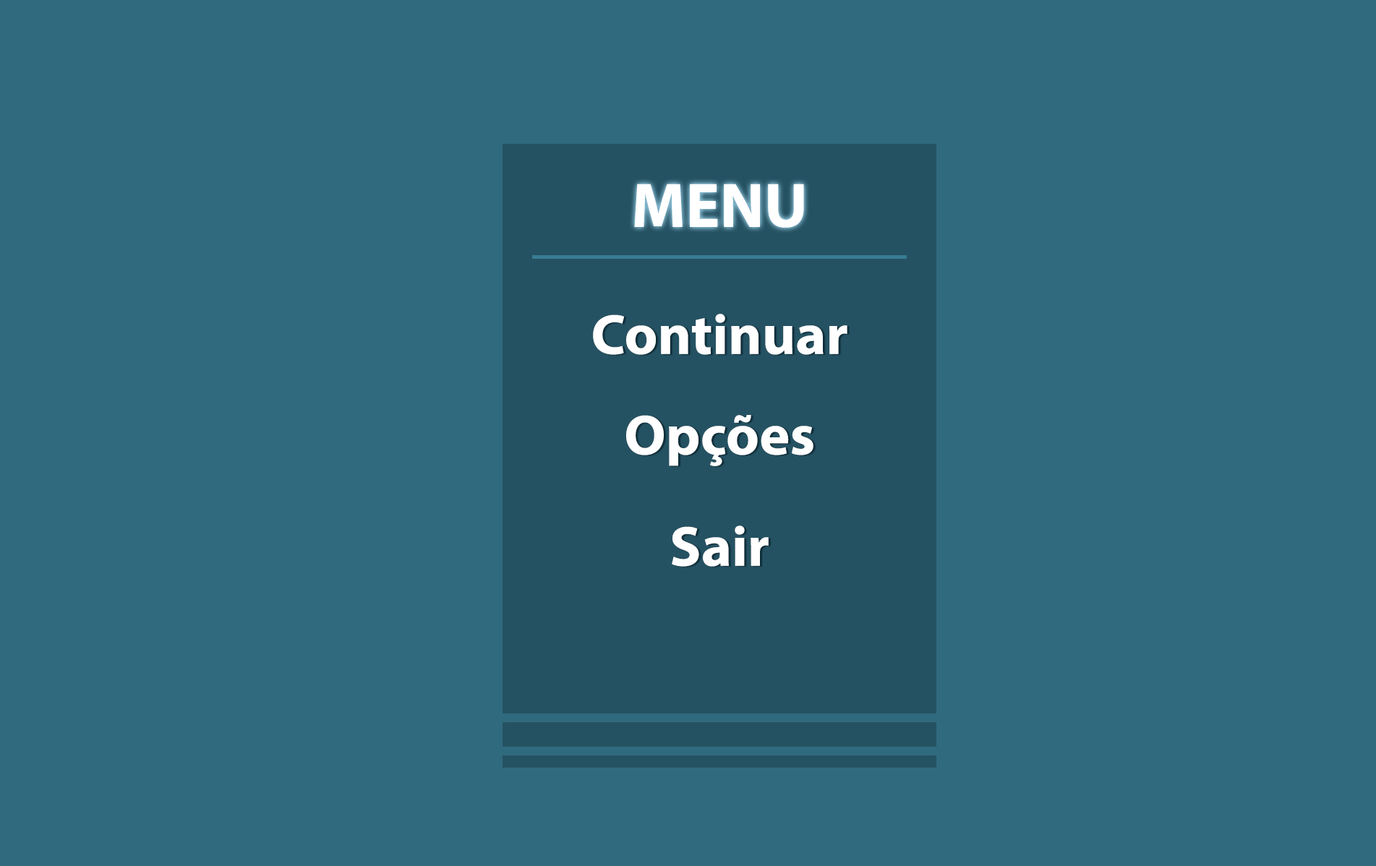
<style>
.page{position:relative;width:1376px;height:866px;background:#306a7f}
.page>*{position:absolute;margin:0}
.t1{font:63.1px "MyriadPro-Bold";color:#ffffff}
.t2{font:47.3px "MyriadPro-Bold";color:#ffffff}
.t3{font:56.8px "MyriadPro-Bold";color:#ffffff}
</style>
<div class="page">
<p class="t1" style="left:634px;top:184px;width:170px;height:44px;text-align:center">MENU<br><span class="t2"><br>e</span></p>
<p class="t3" style="left:593px;top:314px;width:255px;height:41px;text-align:center">Continuar<br><span class="t2"><br>e</span></p>
<p class="t3" style="left:626px;top:415px;width:188px;height:51px;text-align:center">Opções<br><span class="t2"><br>e</span></p>
<p class="t3" style="left:672px;top:526px;width:97px;height:41px;text-align:center">Sair<br><br><span class="t2"><br>e</span></p>
</div>
